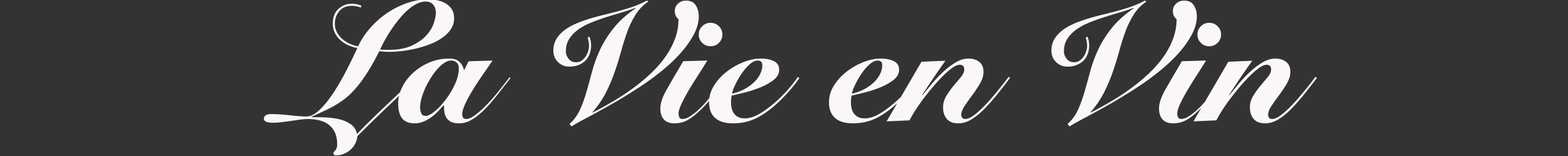
<style>
.page{position:relative;width:1568px;height:156px;background:#333333}
.page>*{position:absolute;margin:0}
.t1{font:168.2px "SnellRoundhand-Black";color:#faf7f6}
</style>
<div class="page">
<p class="t1" style="left:264px;top:0px;width:1053px;height:155px">La Vie en Vin</p>
</div>
